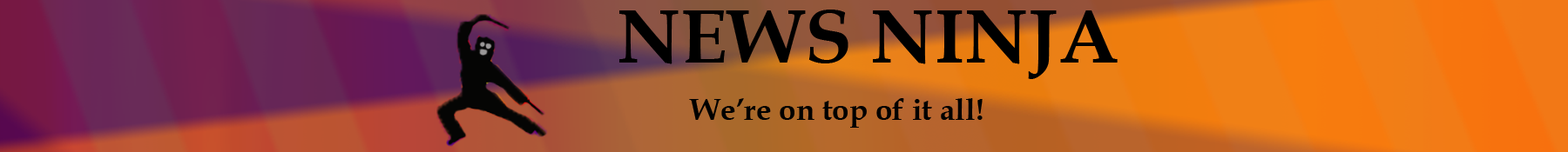
<style>
.page{position:relative;width:1568px;height:152px}
.page>*{position:absolute;margin:0}
.t1{font:76.8px "BookAntiqua-Bold";color:#000000}
.t2{font:30.5px "BookAntiqua-Bold";color:#000000}
</style>
<div class="page">
<p class="t1" style="left:619px;top:10px;width:499px;height:69px">NEWS NINJA</p>
<p class="t2" style="left:689px;top:98px;width:294px;height:30px">We’re on top of it all!</p>
</div>
